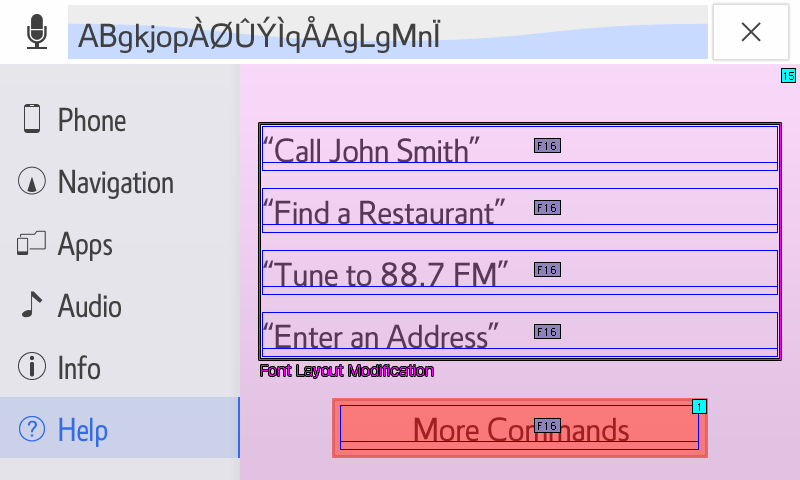
<style>
.page{position:relative;width:800px;height:480px}
.page>*{position:absolute;margin:0}
.t1{font:30px "Tfont1507a_T1S";color:#404041}
.t2{font:30px "Tfont1507a_T2S";color:#404041}
.t3{font:30px/62px "Tfont1507a_T1S";color:#583859}
.t4{font:30px "Tfont1502_T2S";color:#404041}
.t5{font:14px "ShinGoPro-Regular";color:#ff00ff}
.t6{font:30px "Tfont1502_T2S";color:#336ce6}
.t7{font:30px "Tfont1507a_T1S";color:#a02020}
</style>
<div class="page">
<p class="t1" style="left:78px;top:16px;width:363px;height:37px">ABgkjopÀØÛÝÌqÅAgLgMnÏ</p>
<p class="t2" style="left:59px;top:107px;width:67px;height:25px">Phone</p>
<p class="t3" style="left:263px;top:136px;width:245px;height:213px">“Call John Smith”<br>“Find a Restaurant”<br>“Tune to 88.7 FM”<br>“Enter an Address”</p>
<p class="t4" style="left:59px;top:169px;width:114px;height:30px">Navigation</p>
<p class="t4" style="left:57px;top:231px;width:55px;height:30px">Apps</p>
<p class="t4" style="left:57px;top:293px;width:64px;height:25px">Audio</p>
<p class="t4" style="left:59px;top:355px;width:41px;height:25px">Info</p>
<p class="t5" style="left:261px;top:365px;width:172px;height:13px">Font Layout Modification</p>
<p class="t6" style="left:59px;top:417px;width:49px;height:30px">Help</p>
<p class="t7" style="left:414px;top:417px;width:215px;height:25px">More Commands</p>
</div>
